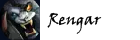
<style>
.page{position:relative;width:140px;height:40px;background:#ffffff}
.page>*{position:absolute;margin:0}
.t1{font:12px "VinerHandITC";color:#000000}
</style>
<div class="page">
<p class="t1" style="left:47px;top:12px;width:55px;height:22px">Rengar</p>
</div>
